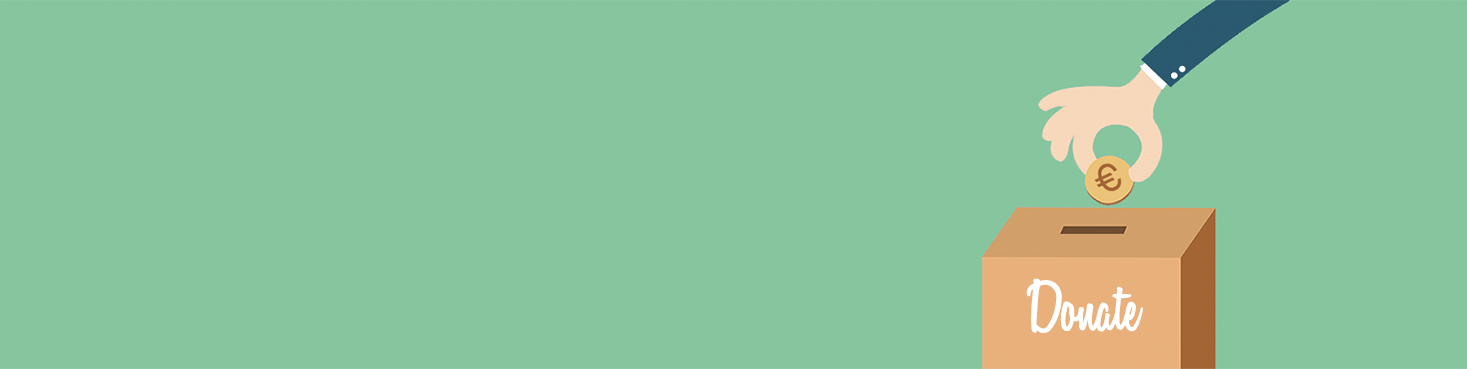
<style>
.page{position:relative;width:1467px;height:369px;background:#86c59e}
.page>*{position:absolute;margin:0}
.t1{font:65.2px "VarianeScript";color:#ffffff}
</style>
<div class="page">
<p class="t1" style="left:1026px;top:278px;width:117px;height:55px">Donate</p>
</div>
